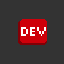
<style>
.page{position:relative;width:64px;height:64px;background:#333333}
.page>*{position:absolute;margin:0}
.t1{font:18px "MunroSmall";color:#ffffff}
</style>
<div class="page">
<p class="t1" style="left:21px;top:27px;width:25px;height:9px">DEV</p>
</div>
